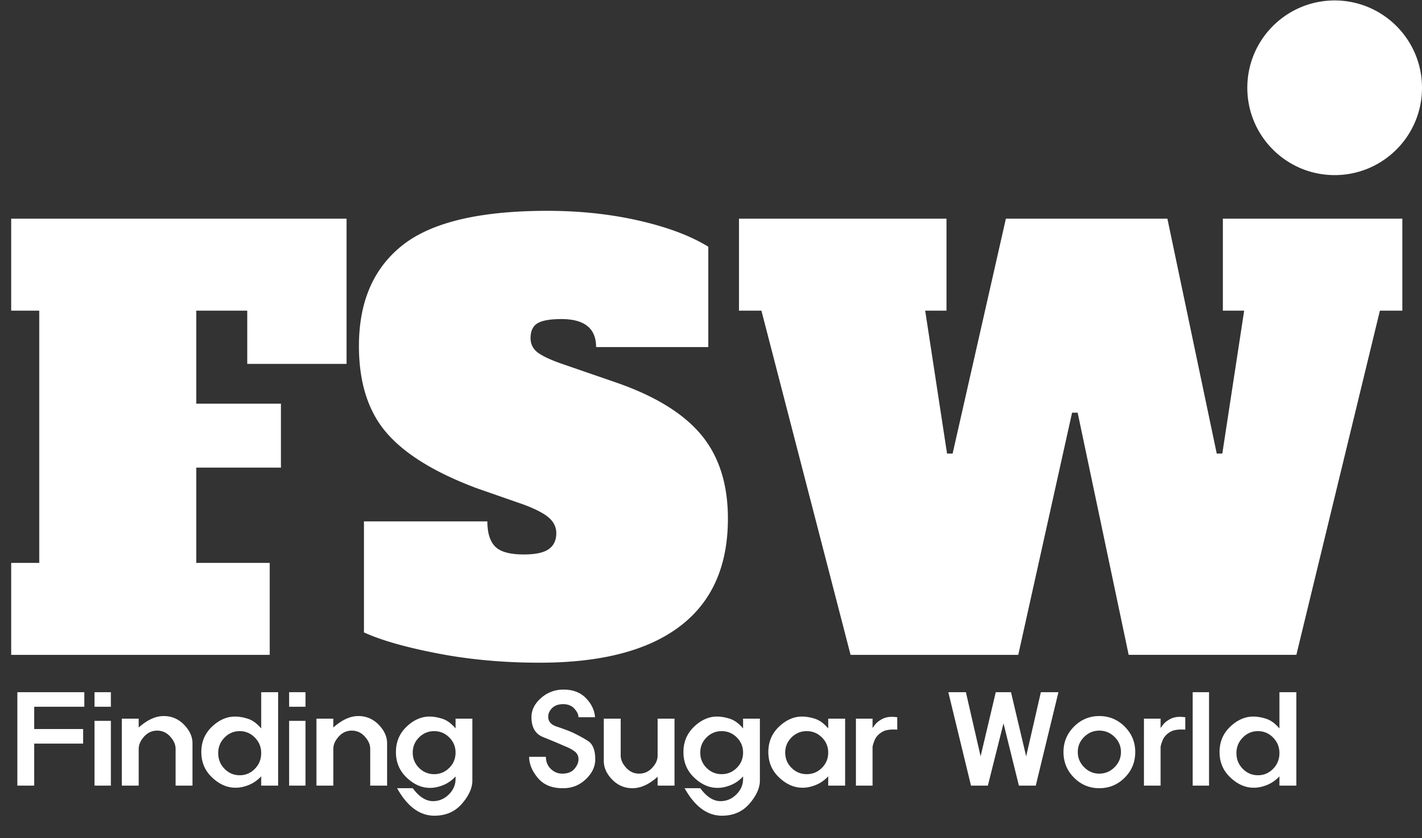
<style>
.page{position:relative;width:1422px;height:838px;background:#333333}
.page>*{position:absolute;margin:0}
.t1{font:560.8px "AlfaSlabOne-Regular";color:#ffffff}
.t2{font:119.7px "ExpoM-HM";color:#ffffff}
</style>
<div class="page">
<p class="t1" style="left:11px;top:211px;width:1392px;height:452px">FSW</p>
<p class="t2" style="left:17px;top:690px;width:1280px;height:126px">Finding Sugar World</p>
</div>
